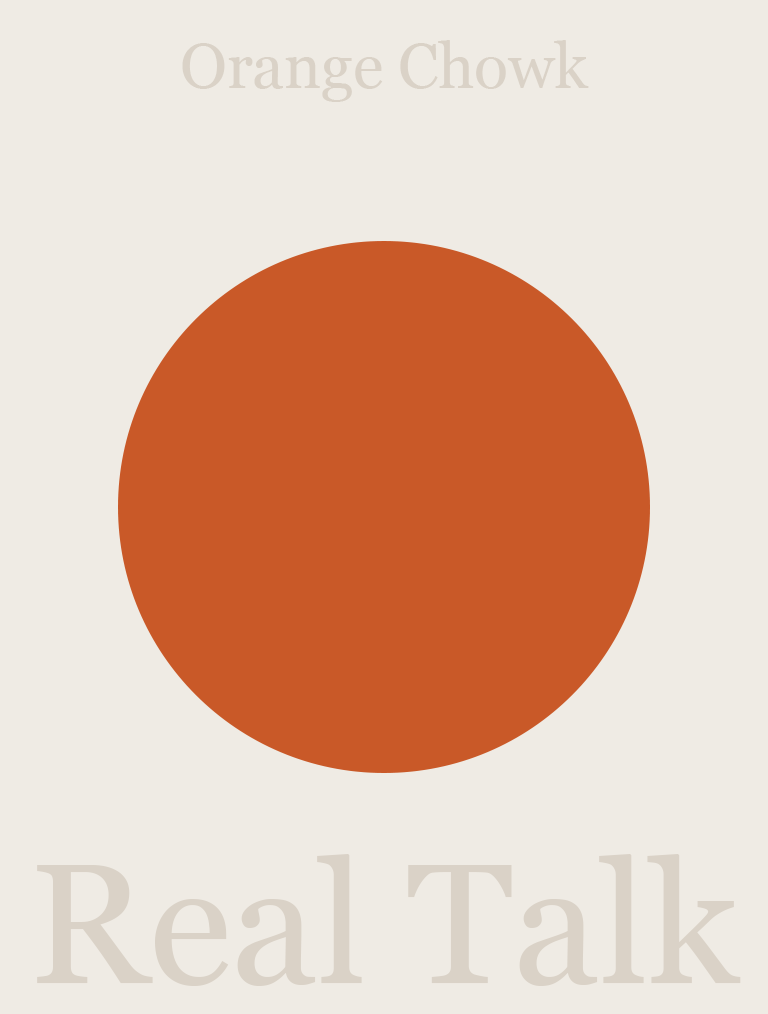
<style>
.page{position:relative;width:768px;height:1014px;background:#efebe4}
.page>*{position:absolute;margin:0}
.t1{font:62.5px "Georgia";color:#dad2c7}
.t2{font:170.5px "Georgia";color:#dad2c7}
</style>
<div class="page">
<p class="t1" style="left:182px;top:40px;width:407px;height:62px">Orange Chowk</p>
<p class="t2" style="left:37px;top:854px;width:704px;height:132px">Real Talk</p>
</div>
